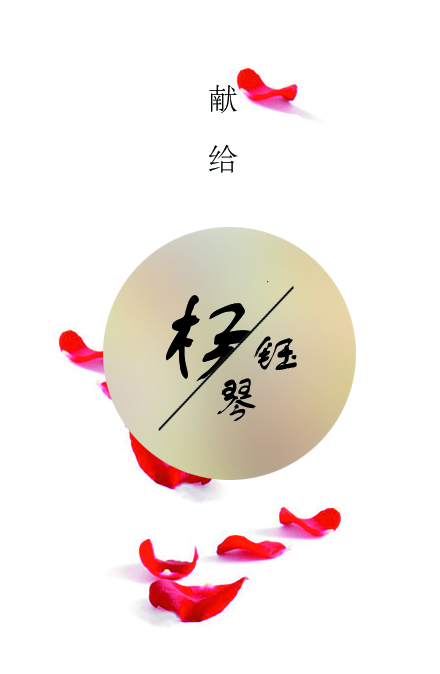
<style>
.page{position:relative;width:440px;height:674px;background:#ffffff}
.page>*{position:absolute;margin:0}
.t1{font:30px/60px "STSong";color:#000000}
.t2{font:50px "FZSTK--GBK1-0";color:#000000}
</style>
<div class="page">
<p class="t1" style="left:209px;top:84px;width:29px;height:89px">献<br>给</p>
<p class="t2" style="left:254px;top:336px;width:43px;height:34px">钰</p>
<p class="t2" style="left:217px;top:378px;width:39px;height:44px">琴</p>
</div>
